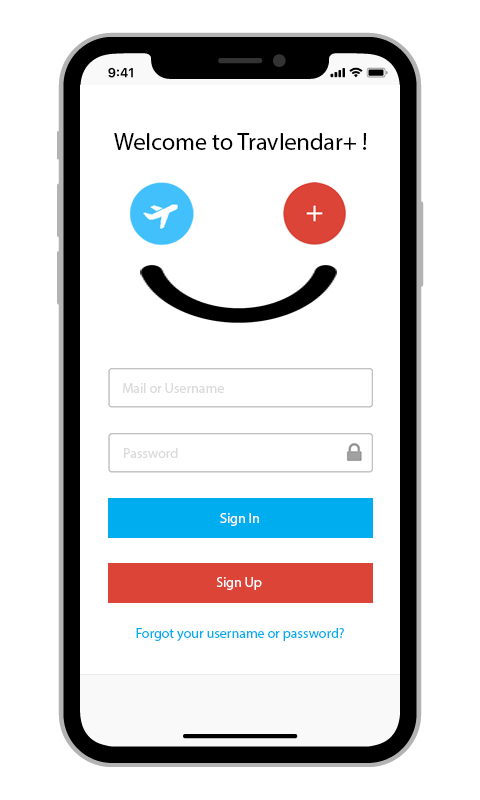
<style>
.page{position:relative;width:480px;height:800px;background:#ffffff}
.page>*{position:absolute;margin:0}
.t1{font:24px "MyriadPro-Regular";color:#000000}
.t2{font:14px "MyriadPro-Regular";color:#dadada}
.t3{font:14px "MyriadPro-Regular";color:#ffffff}
.t4{font:14px "MyriadPro-Regular";color:#00aeef}
</style>
<div class="page">
<p class="t1" style="left:114px;top:133px;width:253px;height:17px">Welcome to Travlendar+ !</p>
<p class="t2" style="left:123px;top:383px;width:101px;height:10px">Mail or Username</p>
<p class="t2" style="left:124px;top:448px;width:54px;height:10px">Password</p>
<p class="t3" style="left:220px;top:513px;width:39px;height:13px">Sign In</p>
<p class="t3" style="left:216px;top:577px;width:46px;height:13px">Sign Up</p>
<p class="t4" style="left:136px;top:628px;width:208px;height:13px">Forgot your username or password?</p>
</div>
